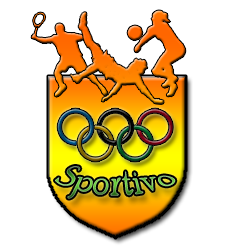
<style>
.page{position:relative;width:250px;height:250px;background:#ffffff}
.page>*{position:absolute;margin:0}
.t1{font:30px "PoorRichard-Regular"}
</style>
<div class="page">
<p class="t1" style="left:55px;top:166px;width:121px;height:33px">Sportivo</p>
</div>
